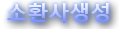
<style>
.page{position:relative;width:119px;height:29px}
.page>*{position:absolute;margin:0}
.t1{font:21px "MalgunGothicBold"}
</style>
<div class="page">
<p class="t1" style="left:7px;top:3px;width:102px;height:20px">소환사생성</p>
</div>
